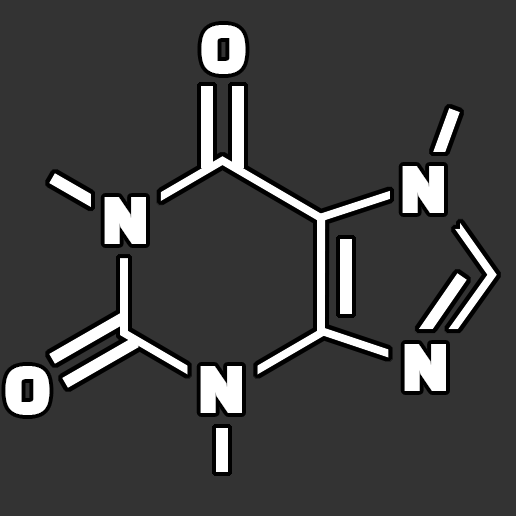
<style>
.page{position:relative;width:516px;height:516px;background:#333333}
.page>*{position:absolute;margin:0}
.t1{font:62.8px "BlackHanSans-Regular";color:#ffffff}
</style>
<div class="page">
<p class="t1" style="left:201px;top:25px;width:45px;height:49px">O</p>
<p class="t1" style="left:402px;top:166px;width:42px;height:47px">N</p>
<p class="t1" style="left:104px;top:197px;width:42px;height:47px">N</p>
<p class="t1" style="left:404px;top:344px;width:42px;height:47px">N</p>
<p class="t1" style="left:5px;top:366px;width:45px;height:49px">O</p>
<p class="t1" style="left:200px;top:366px;width:42px;height:47px">N</p>
</div>
